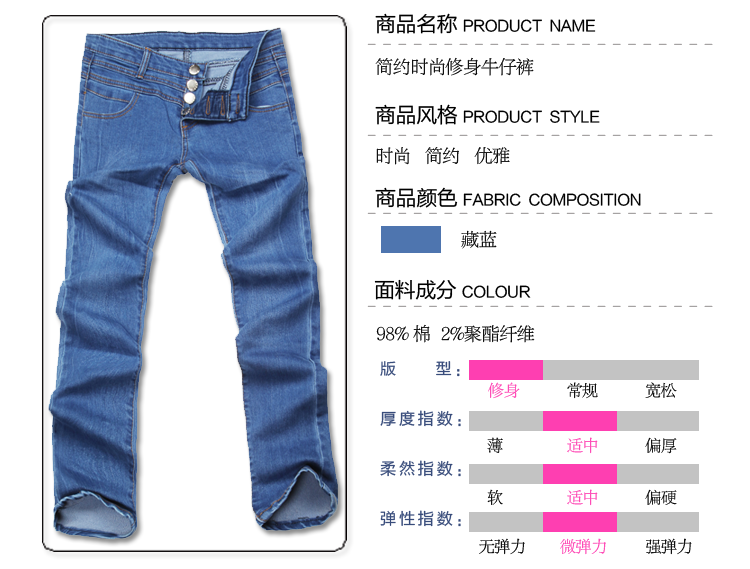
<style>
.page{position:relative;width:750px;height:569px;background:#ffffff}
.page>*{position:absolute;margin:0}
.t1{font:15px "FZLTHJW--GB1-0";letter-spacing:-0.02em;color:#000000}
.t2{font:21px "FZLTHJW--GB1-0";letter-spacing:-0.02em;color:#000000}
.t3{font:15px "FZLTSK--GBK1-0";letter-spacing:0.38em;color:#9f9b9b}
.t4{font:18px "FZLTSK--GBK1-0";letter-spacing:-0.02em;color:#000000}
.t5{font:16px/50px "FZLTHJW--GB1-0";letter-spacing:0.18em;color:#384c7b}
.t6{font:16px "FZLTSK--GBK1-0";letter-spacing:-0.02em;color:#000000}
.t7{font:16px "FZLTSK--GBK1-0";letter-spacing:-0.02em;color:#fe3fb1}
</style>
<div class="page">
<p class="t1" style="left:375px;top:13px;width:221px;height:21px"><span class="t2">商品名称 </span>PRODUCT  NAME</p>
<p class="t3" style="left:367px;top:43px;width:346px;height:2px">-----------------------</p>
<p class="t4" style="left:375px;top:57px;width:159px;height:19px">简约时尚修身牛仔裤</p>
<p class="t1" style="left:375px;top:104px;width:225px;height:21px"><span class="t2">商品风格 </span>PRODUCT  STYLE</p>
<p class="t3" style="left:367px;top:134px;width:346px;height:2px">-----------------------</p>
<p class="t4" style="left:376px;top:147px;width:134px;height:18px">时尚   简约   优雅</p>
<p class="t1" style="left:375px;top:187px;width:266px;height:21px"><span class="t2">商品颜色 </span>FABRIC  COMPOSITION</p>
<p class="t3" style="left:367px;top:212px;width:346px;height:2px">-----------------------</p>
<p class="t4" style="left:461px;top:230px;width:36px;height:19px">藏蓝</p>
<p class="t1" style="left:374px;top:279px;width:157px;height:21px"><span class="t2">面料成分 </span>COLOUR</p>
<p class="t3" style="left:367px;top:305px;width:346px;height:2px">-----------------------</p>
<p class="t4" style="left:376px;top:324px;width:159px;height:19px">98% 棉  2%聚酯纤维</p>
<p class="t5" style="left:380px;top:361px;width:81px;height:166px">版     型：<br>厚度指数：<br>柔然指数：<br>弹性指数：</p>
<p class="t6" style="left:488px;top:382px;width:189px;height:17px"><span class="t7">修身</span>           常规           宽松</p>
<p class="t7" style="left:487px;top:437px;width:190px;height:17px"><span class="t6">薄               </span>适中<span class="t6">           偏厚</span></p>
<p class="t7" style="left:487px;top:489px;width:190px;height:17px"><span class="t6">软               </span>适中<span class="t6">           偏硬</span></p>
<p class="t6" style="left:479px;top:538px;width:213px;height:17px">无弹力        <span class="t7">微弹力</span>         强弹力</p>
</div>
